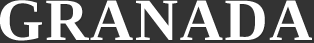
<style>
.page{position:relative;width:314px;height:43px;background:#333333}
.page>*{position:absolute;margin:0}
.t1{font:60px "Tinos-Bold";letter-spacing:0.025em;color:#ffffff}
</style>
<div class="page">
<p class="t1" style="left:0px;top:0px;width:312px;height:41px">GRANADA</p>
</div>
